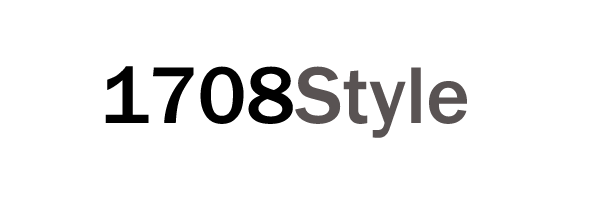
<style>
.page{position:relative;width:600px;height:200px;background:#ffffff}
.page>*{position:absolute;margin:0}
.t1{font:83px "FranklinGothic-Medium";color:#595353}
.t2{font:83px "FranklinGothic-Medium";color:#000000}
</style>
<div class="page">
<p class="t1" style="left:105px;top:66px;width:362px;height:72px"><span class="t2">1708</span>Style</p>
</div>
